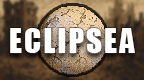
<style>
.page{position:relative;width:144px;height:80px}
.page>*{position:absolute;margin:0}
.t1{font:30.6px "Impact";letter-spacing:0.075em;color:#ffffff}
</style>
<div class="page">
<p class="t1" style="left:10px;top:28px;width:125px;height:25px">ECLIPSEA</p>
</div>
